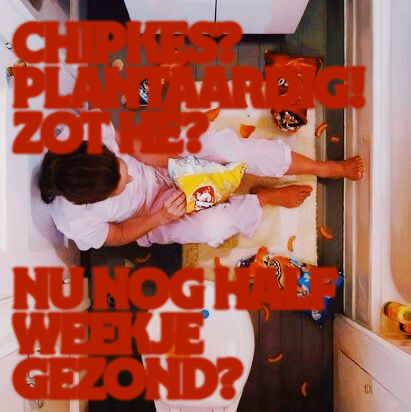
<style>
.page{position:relative;width:411px;height:412px}
.page>*{position:absolute;margin:0}
.t1{font:45.4px/45.4px "NYBotanicalGothic-Extrabold";letter-spacing:-0.02em;color:#b81f00}
</style>
<div class="page">
<p class="t1" style="left:13px;top:22px;width:353px;height:130px">CHIPKES? PLANTAARDIG!<br>ZOT HÉ?</p>
<p class="t1" style="left:13px;top:268px;width:323px;height:131px">NU nog HALF WEEKJE gezond?</p>
</div>
